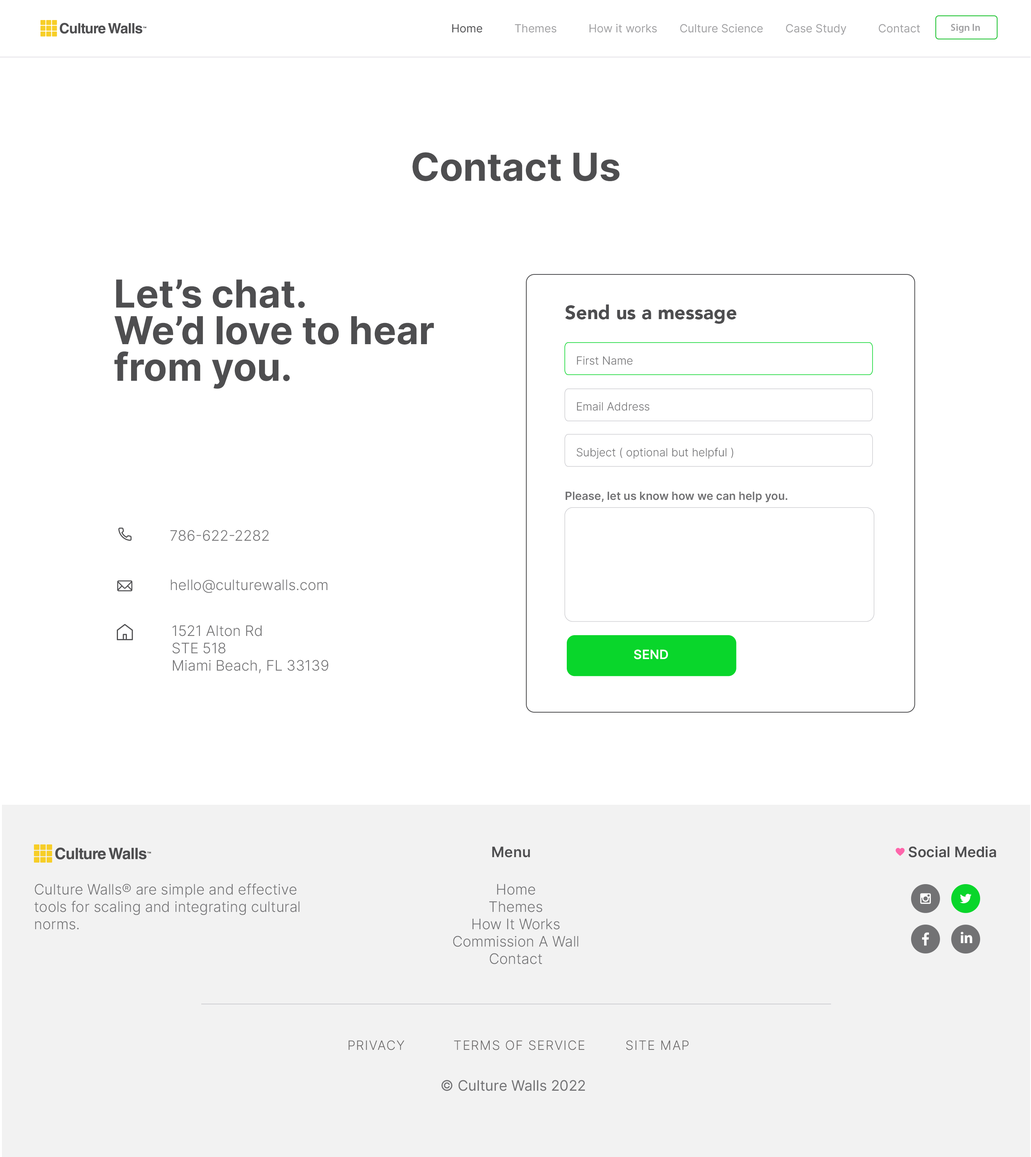
<style>
.page{position:relative;width:1031px;height:1157px;background:#ffffff}
.page>*{position:absolute;margin:0}
.t1{font:11.2px "Inter-Regular";color:#a0a0a2}
.t2{font:11.2px "Inter-Regular";color:#4e4e50}
.t3{font:10.1px "MyriadPro-Semibold";color:#a0a0a2}
.t4{font:38.5px "Inter-Bold";color:#4e4e50}
.t5{font:38.5px/36.6px "Inter-Bold";color:#4e4e50}
.t6{font:19.3px "Avenir-Black";color:#4e4e50}
.t7{font:11.2px "Inter-Light";color:#727274}
.t8{font:11.2px "Inter-SemiBold";color:#727274}
.t9{font:14.5px "Inter-Light";color:#727274}
.t10{font:12.8px "Inter-SemiBold";color:#ffffff}
.t11{font:14.5px "Inter-SemiBold";color:#4e4e50}
.t12{font:12.8px "Inter-Light";letter-spacing:0.06em;color:#696767}
.t13{font:14.5px "Inter-Regular";color:#727274}
</style>
<div class="page">
<p class="t1" style="left:452px;top:24px;width:468px;height:11px"><span class="t2">Home          </span>Themes          How it works       Culture Science       Case Study          Contact</p>
<p class="t3" style="left:950px;top:24px;width:30px;height:9px">Sign In</p>
<p class="t4" style="left:412px;top:152px;width:207px;height:29px">Contact Us</p>
<p class="t5" style="left:114px;top:279px;width:320px;height:110px">Let’s chat.<br>We’d love to hear<br>from you.</p>
<p class="t6" style="left:565px;top:304px;width:171px;height:20px">Send us a message</p>
<p class="t7" style="left:577px;top:356px;width:55px;height:9px">First Name</p>
<p class="t7" style="left:577px;top:402px;width:72px;height:9px">Email Address</p>
<p class="t7" style="left:576px;top:447px;width:157px;height:12px">Subject ( optional but helpful )</p>
<p class="t8" style="left:565px;top:491px;width:222px;height:11px">Please, let us know how we can help you.</p>
<p class="t9" style="left:170px;top:530px;width:99px;height:11px">786-622-2282</p>
<p class="t9" style="left:171px;top:579px;width:156px;height:14px">hello@culturewalls.com</p>
<p class="t9" style="left:172px;top:625px;width:156px;height:48px">1521 Alton Rd<br>STE 518<br>Miami Beach, FL 33139</p>
<p class="t10" style="left:634px;top:649px;width:34px;height:10px">SEND</p>
<p class="t11" style="left:908px;top:846px;width:88px;height:12px">Social Media</p>
<p class="t11" style="left:492px;top:846px;width:38px;height:12px">Menu</p>
<p class="t9" style="left:34px;top:883px;width:265px;height:47px">Culture Walls® are simple and effective tools for scaling and integrating cultural norms.</p>
<p class="t9" style="left:453px;top:884px;width:125px;height:80px;text-align:center">Home<br>Themes<br>How It Works<br>Commission A Wall<br>Contact</p>
<p class="t12" style="left:348px;top:1040px;width:340px;height:10px">PRIVACY           TERMS OF SERVICE         SITE MAP</p>
<p class="t13" style="left:441px;top:1080px;width:144px;height:11px">© Culture Walls 2022</p>
</div>
